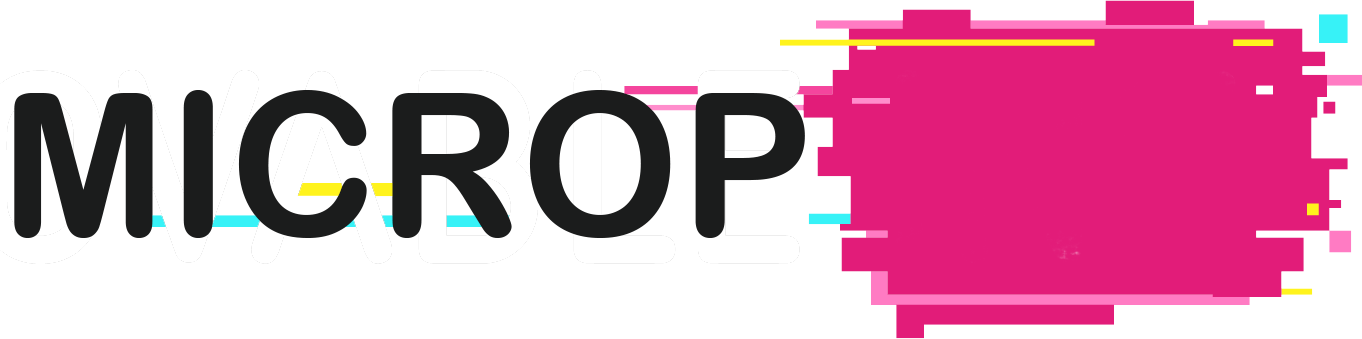
<style>
.page{position:relative;width:1362px;height:339px;background:#ffffff}
.page>*{position:absolute;margin:0}
.t1{font:200px "ArialRoundedMTBold";color:#1b1c1c}
</style>
<div class="page">
<p class="t1" style="left:14px;top:90px;width:791px;height:148px">MICROP</p>
</div>
